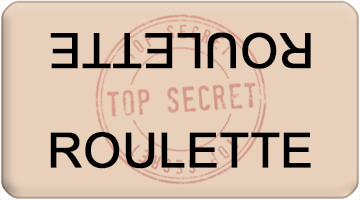
<style>
.page{position:relative;width:360px;height:200px;background:#e8d0bb}
.page>*{position:absolute;margin:0}
.t1{font:48px "ArialMT";color:#000000;font-weight:bold}
</style>
<div class="page">
<p class="t1" style="left:50px;top:32px;width:261px;height:37px;rotate:180deg">ROULETTE</p>
<p class="t1" style="left:50px;top:132px;width:261px;height:37px">ROULETTE</p>
</div>
